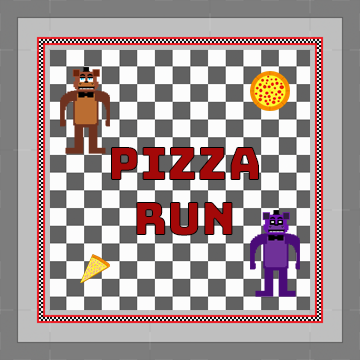
<style>
.page{position:relative;width:360px;height:360px}
.page>*{position:absolute;margin:0}
.t1{font:45.8px "Bungee-Regular";color:#a30808}
</style>
<div class="page">
<p class="t1" style="left:111px;top:147px;width:148px;height:89px;text-align:center">Pizza<br>Run</p>
</div>
